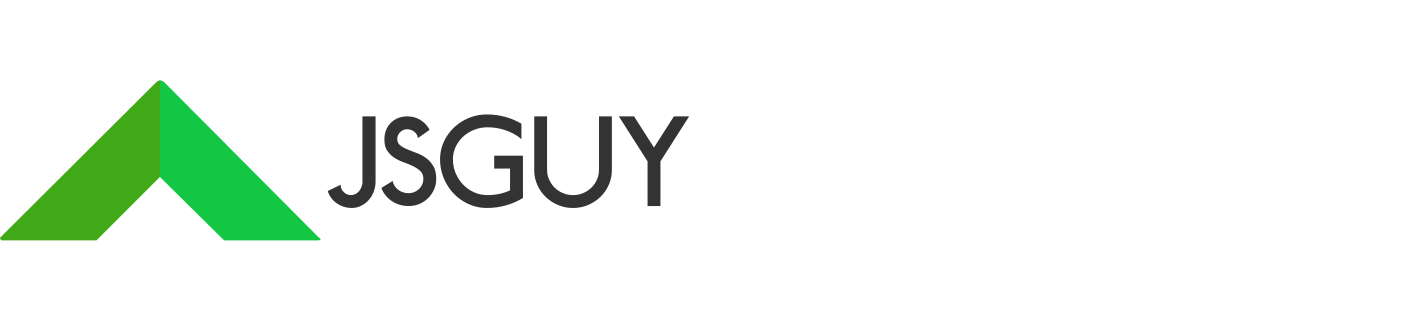
<style>
.page{position:relative;width:1417px;height:321px;background:#ffffff}
.page>*{position:absolute;margin:0}
.t1{font:128px "Railway";color:#333333}
</style>
<div class="page">
<p class="t1" style="left:327px;top:114px;width:363px;height:94px">JSGUY</p>
</div>
